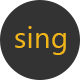
<style>
.page{position:relative;width:80px;height:80px;background:#333333}
.page>*{position:absolute;margin:0}
.t1{font:29.2px "SegoeUI";letter-spacing:0.01em;color:#f0b518}
</style>
<div class="page">
<p class="t1" style="left:15px;top:26px;width:51px;height:29px">sing</p>
</div>
